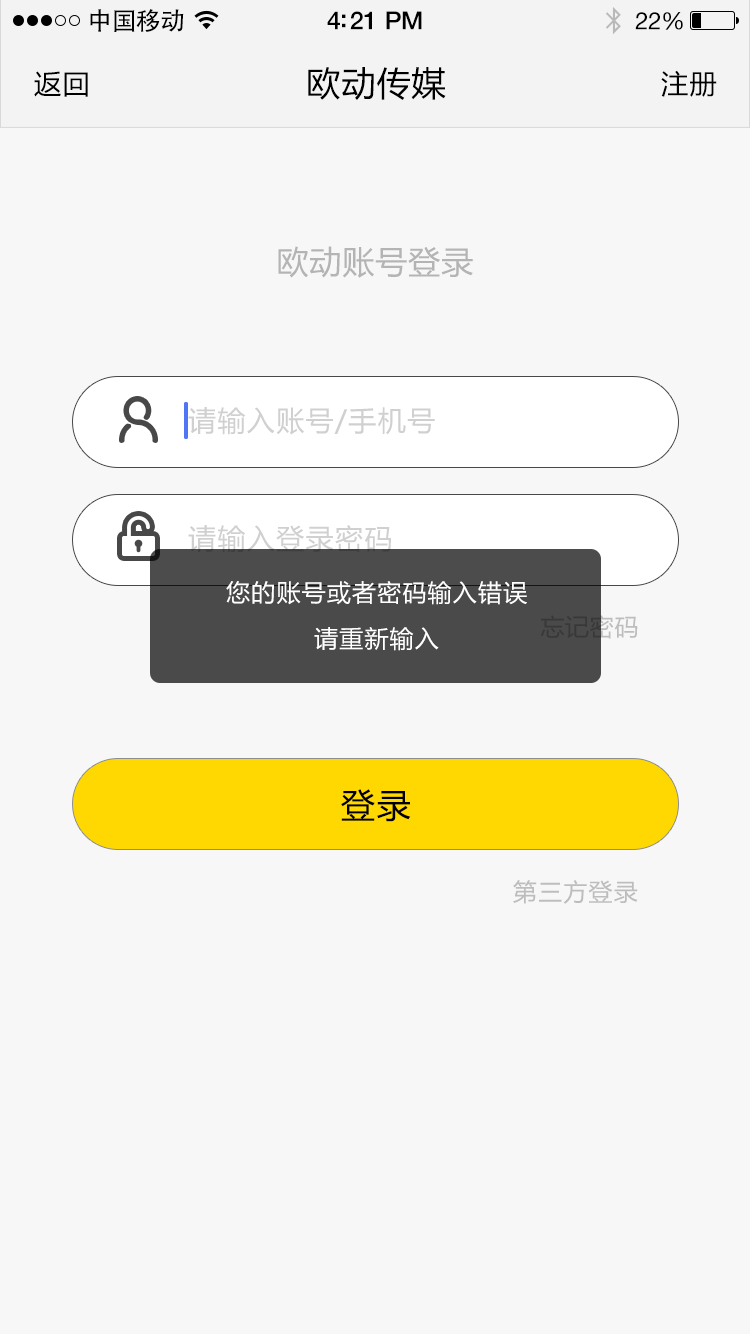
<style>
.page{position:relative;width:750px;height:1334px;background:#f7f7f7}
.page>*{position:absolute;margin:0}
.t1{font:25px "AdobeHeitiStd-Regular";letter-spacing:-0.025em;color:#000000}
.t2{font:25px "HelveticaNeue-Medium";letter-spacing:-0.02em;color:#000000}
.t3{font:24px "HelveticaNeue";letter-spacing:-0.02em;color:#000000}
.t4{font:27px "MicrosoftYaHei";letter-spacing:0.05em;color:#000000}
.t5{font:34px "MicrosoftYaHei";letter-spacing:0.03em;color:#000000}
.t6{font:32px "MicrosoftYaHei";letter-spacing:0.03em;color:#b4b4b4}
.t7{font:28px "MicrosoftYaHei";letter-spacing:0.05em;color:#d0d0d0}
.t8{font:23.9px "MicrosoftYaHei";letter-spacing:0.05em;color:#ffffff}
.t9{font:34px "MicrosoftYaHei";letter-spacing:0.05em;color:#000000}
.t10{font:24px "MicrosoftYaHei";letter-spacing:0.05em;color:#bdbdbd}
</style>
<div class="page">
<p class="t1" style="left:90px;top:9px;width:94px;height:23px">中国移动</p>
<p class="t2" style="left:327px;top:11px;width:95px;height:19px">4:21 PM</p>
<p class="t3" style="left:635px;top:12px;width:48px;height:18px">22%</p>
<p class="t4" style="left:34px;top:71px;width:54px;height:26px">返回</p>
<p class="t5" style="left:308px;top:67px;width:138px;height:33px">欧动传媒</p>
<p class="t4" style="left:661px;top:70px;width:56px;height:27px">注册</p>
<p class="t6" style="left:278px;top:246px;width:195px;height:32px">欧动账号登录</p>
<p class="t7" style="left:188px;top:407px;width:247px;height:28px">请输入账号/手机号</p>
<p class="t8" style="left:226px;top:581px;width:301px;height:24px">您的账号或者密码输入错误</p>
<p class="t8" style="left:314px;top:627px;width:125px;height:24px">请重新输入</p>
<p class="t9" style="left:341px;top:789px;width:70px;height:33px">登录</p>
<p class="t10" style="left:513px;top:880px;width:125px;height:24px">第三方登录</p>
</div>
